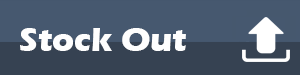
<style>
.page{position:relative;width:300px;height:75px;background:#46586f}
.page>*{position:absolute;margin:0}
.t1{font:35.1px "ErasITC-Bold";color:#fefefe;scale:0.96 1}
</style>
<div class="page">
<p class="t1" style="left:20px;top:28px;width:166px;height:23px">Stock Out</p>
</div>
